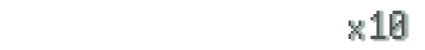
<style>
.page{position:relative;width:425px;height:50px;background:#ffffff}
.page>*{position:absolute;margin:0}
.t1{font:31.3px "HighPixel-7";letter-spacing:0.02em;color:#4f534c;scale:0.96 1}
.t2{font:26.3px "HighPixel-7";letter-spacing:0.02em;color:#4f534c;scale:0.96 1}
</style>
<div class="page">
<p class="t1" style="left:348px;top:10px;width:57px;height:29px"><span class="t2"><br></span><span class="t2">x    </span>10</p>
</div>
